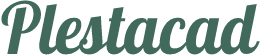
<style>
.page{position:relative;width:260px;height:55px;background:#ffffff}
.page>*{position:absolute;margin:0}
.t1{font:71.4px "Galada-Regular";color:#416a5c;scale:0.95 1}
</style>
<div class="page">
<p class="t1" style="left:1px;top:0px;width:259px;height:55px">Plestacad</p>
</div>
